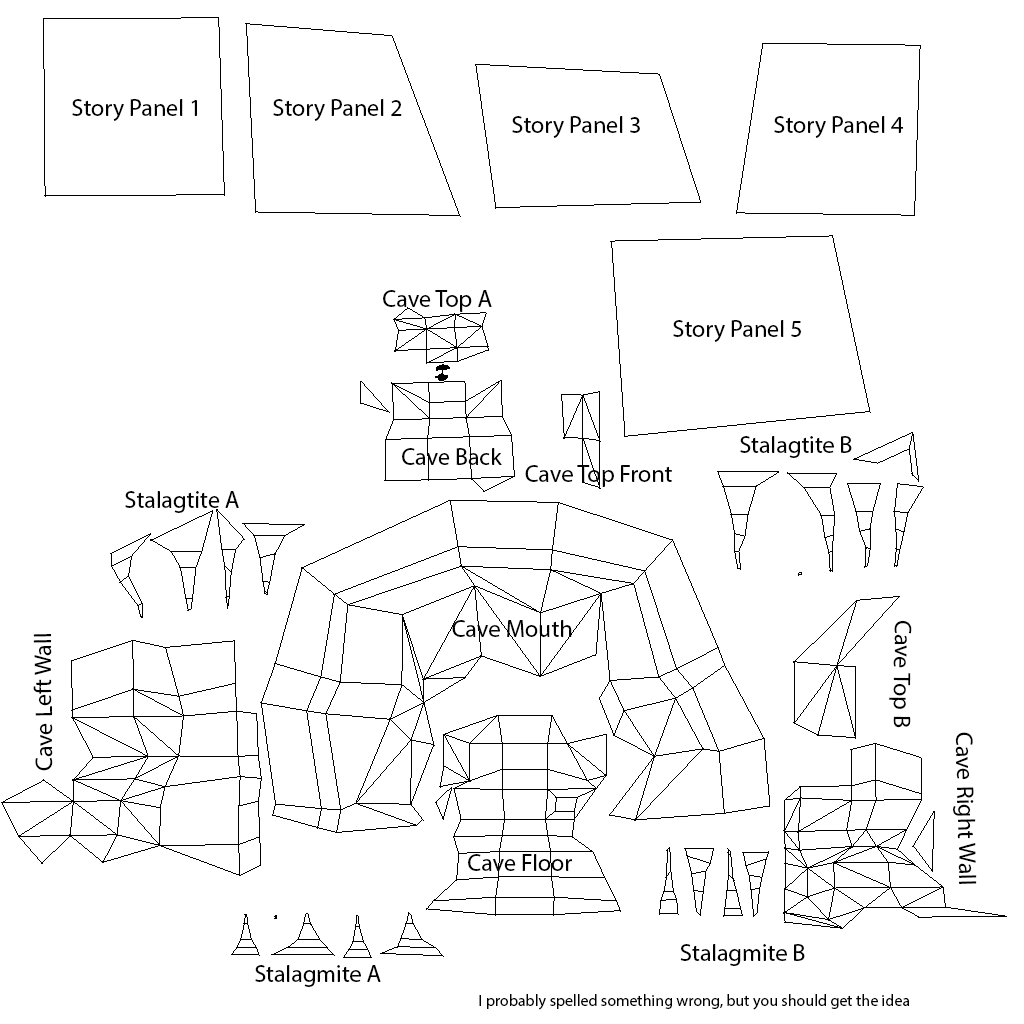
<style>
.page{position:relative;width:1024px;height:1024px;background:#ffffff}
.page>*{position:absolute;margin:0}
.t1{font:24px "MyriadPro-Regular";color:#000000}
.t2{font:16px "MyriadPro-Regular";color:#000000}
</style>
<div class="page">
<p class="t1" style="left:72px;top:99px;width:125px;height:22px">Story Panel 1</p>
<p class="t1" style="left:273px;top:99px;width:129px;height:22px">Story Panel 2</p>
<p class="t1" style="left:512px;top:116px;width:128px;height:22px">Story Panel 3</p>
<p class="t1" style="left:774px;top:116px;width:130px;height:22px">Story Panel 4</p>
<p class="t1" style="left:383px;top:290px;width:109px;height:22px">Cave Top A</p>
<p class="t1" style="left:673px;top:320px;width:128px;height:22px">Story Panel 5</p>
<p class="t1" style="left:740px;top:436px;width:112px;height:22px">Stalagtite B</p>
<p class="t1" style="left:402px;top:448px;width:100px;height:17px">Cave Back</p>
<p class="t1" style="left:525px;top:465px;width:147px;height:22px">Cave Top Front</p>
<p class="t1" style="left:125px;top:491px;width:114px;height:22px">Stalagtite A</p>
<p class="t1" style="left:452px;top:620px;width:120px;height:17px">Cave Mouth</p>
<p class="t1" style="left:889px;top:620px;width:23px;height:108px;rotate:91deg">Cave Top B</p>
<p class="t1" style="left:33px;top:634px;width:20px;height:137px;rotate:-91deg">Cave Left Wall</p>
<p class="t1" style="left:953px;top:732px;width:24px;height:152px;rotate:89deg">Cave Right Wall</p>
<p class="t1" style="left:468px;top:854px;width:104px;height:17px">Cave Floor</p>
<p class="t1" style="left:680px;top:944px;width:125px;height:22px">Stalagmite B</p>
<p class="t1" style="left:255px;top:965px;width:126px;height:22px">Stalagmite A</p>
<p class="t2" style="left:479px;top:994px;width:431px;height:16px">I probably spelled something wrong, but you should get the idea</p>
</div>
